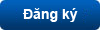
<style>
.page{position:relative;width:100px;height:30px}
.page>*{position:absolute;margin:0}
.t1{font:14px "Arial-BoldMT";color:#ffffff}
</style>
<div class="page">
<p class="t1" style="left:22px;top:8px;width:56px;height:14px">Đăng ký</p>
</div>
